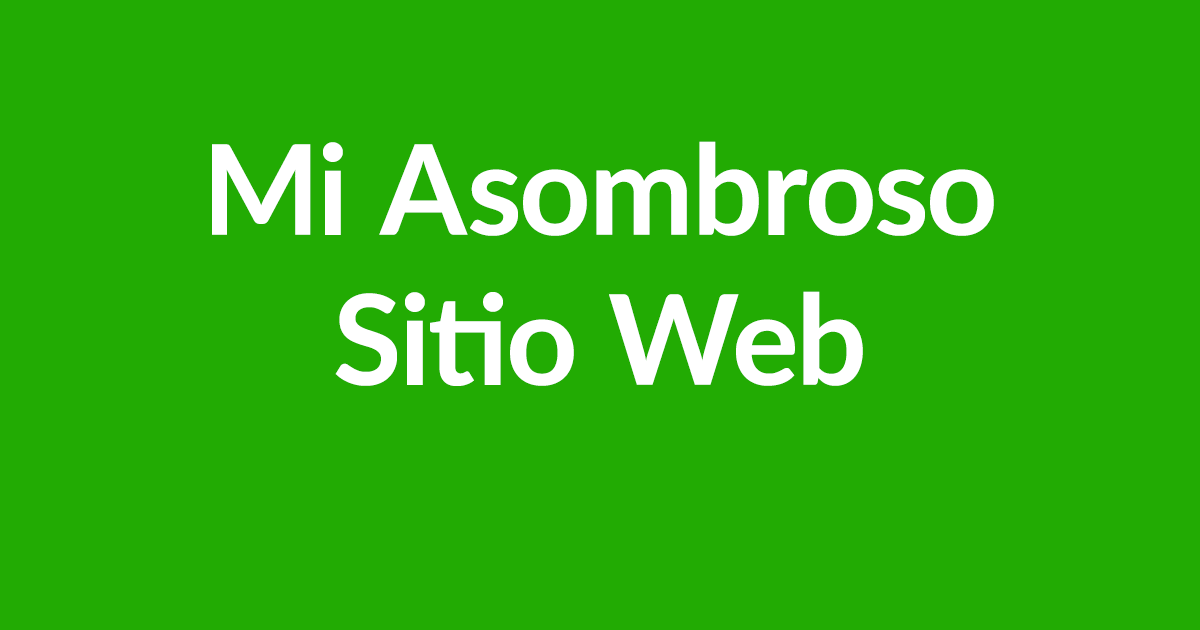
<style>
.page{position:relative;width:1200px;height:630px;background:#22ab03}
.page>*{position:absolute;margin:0}
.t1{font:125px "Lato-Bold";color:#ffffff}
</style>
<div class="page">
<p class="t1" style="left:212px;top:141px;width:782px;height:245px;text-align:center">Mi Asombroso <br>Sitio Web</p>
</div>
